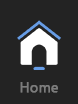
<style>
.page{position:relative;width:78px;height:104px;background:#232323}
.page>*{position:absolute;margin:0}
.t1{font:14px "SegoeUI";color:#7c7c7c;font-weight:bold}
</style>
<div class="page">
<p class="t1" style="left:20px;top:82px;width:38px;height:11px">Home</p>
</div>
